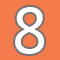
<style>
.page{position:relative;width:60px;height:60px;background:#f47b4c}
.page>*{position:absolute;margin:0}
.t1{font:60px "MicrosoftYaHei";color:#ffffff}
</style>
<div class="page">
<p class="t1" style="left:15px;top:7px;width:30px;height:47px">8</p>
</div>
